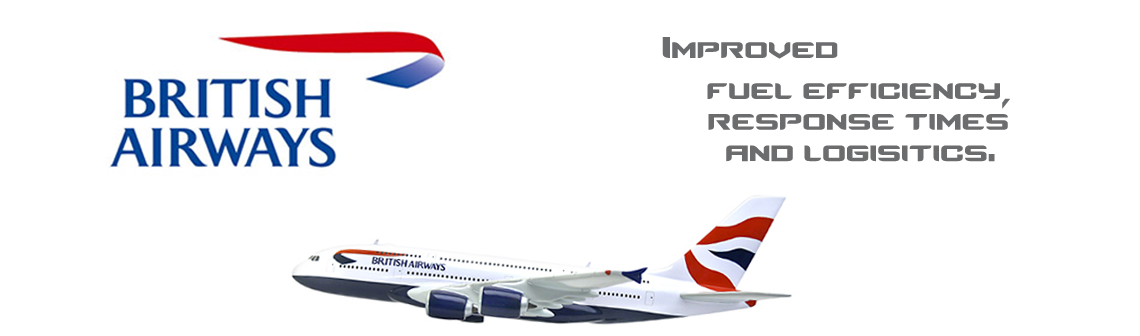
<style>
.page{position:relative;width:1140px;height:336px;background:#ffffff}
.page>*{position:absolute;margin:0}
.t1{font:41.3px "Counter-StrikeRegular";color:#6b6c6e}
</style>
<div class="page">
<p class="t1" style="left:662px;top:37px;width:176px;height:22px">Improved</p>
<p class="t1" style="left:707px;top:83px;width:303px;height:26px">fuel efficiency,</p>
<p class="t1" style="left:708px;top:114px;width:300px;height:16px">response times</p>
<p class="t1" style="left:726px;top:145px;width:269px;height:17px">and logisitics.</p>
</div>
